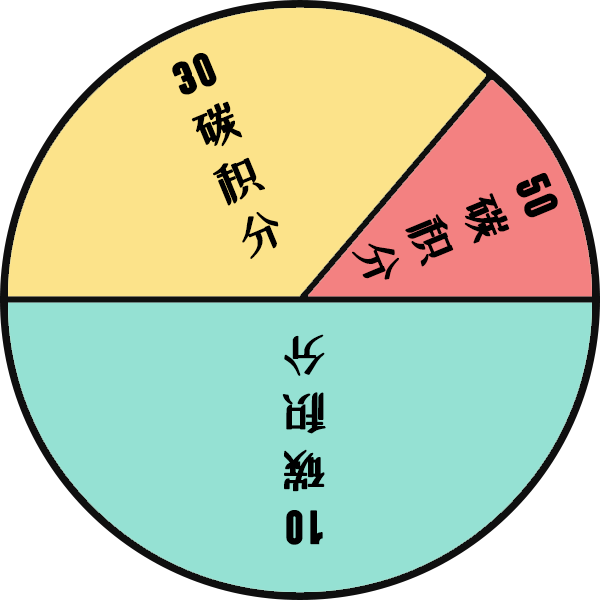
<style>
.page{position:relative;width:600px;height:600px;background:#95e1d3}
.page>*{position:absolute;margin:0}
.t1{font:48px "xiaowei";color:#000000;font-weight:bold}
</style>
<div class="page">
<p class="t1" style="left:172px;top:53px;width:107px;height:206px;text-align:center;rotate:-23deg">30<br>碳<br>积<br>分</p>
<p class="t1" style="left:352px;top:173px;width:206px;height:107px;text-align:center;rotate:68deg">50<br>碳<br>积<br>分</p>
<p class="t1" style="left:282px;top:334px;width:44px;height:211px;text-align:center;rotate:180deg">10<br>碳<br>积<br>分</p>
</div>
